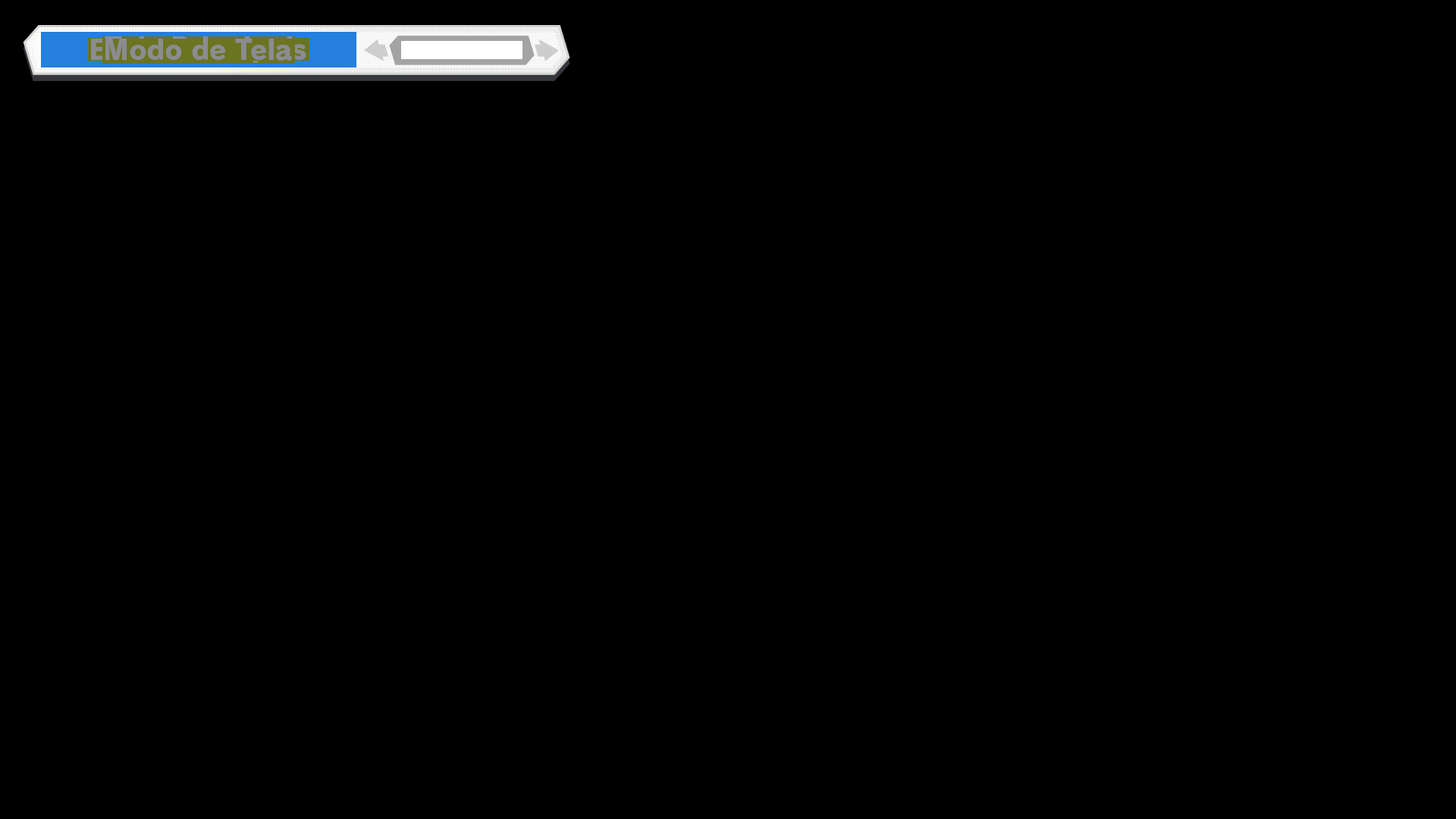
<style>
.page{position:relative;width:1456px;height:819px;background:#000000}
.page>*{position:absolute;margin:0}
.t1{font:27.3px "RodinPro-EB";letter-spacing:-0.05em;color:#8b8c92}
.t2{font:27.3px "RodinPro-EB";letter-spacing:-0.016em;color:#8b8c92}
</style>
<div class="page">
<p class="t1" style="left:91px;top:38px;width:215px;height:23px">Efeitos de Notas</p>
<p class="t2" style="left:105px;top:39px;width:187px;height:22px">Modo de Tela</p>
</div>
